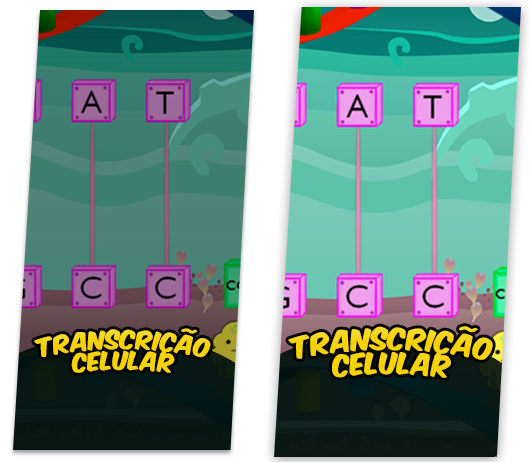
<style>
.page{position:relative;width:530px;height:462px}
.page>*{position:absolute;margin:0}
.t1{font:21.8px/20.8px "KomikaAxis";letter-spacing:0.01em;color:#f7d203}
.t2{font:25.4px/24.2px "KomikaAxis";letter-spacing:0.01em;color:#f7d203}
</style>
<div class="page">
<p class="t1" style="left:34px;top:328px;width:177px;height:45px;text-align:center">transcrição<br>celular</p>
<p class="t2" style="left:288px;top:326px;width:205px;height:52px;text-align:center;rotate:1deg">transcrição<br>celular</p>
</div>
